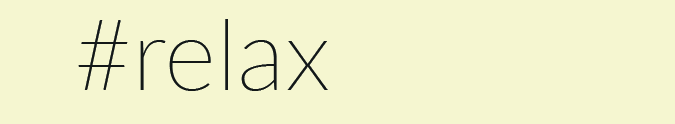
<style>
.page{position:relative;width:675px;height:124px;background:#f5f6d0}
.page>*{position:absolute;margin:0}
.t1{font:100px "Lato-Thin";color:#141819}
</style>
<div class="page">
<p class="t1" style="left:78px;top:19px;width:250px;height:72px">#relax</p>
</div>
